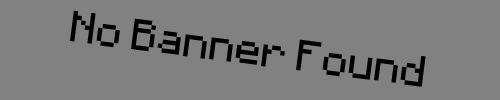
<style>
.page{position:relative;width:500px;height:100px;background:#818181}
.page>*{position:absolute;margin:0}
.t1{font:35px "Minecraft";color:#000000}
</style>
<div class="page">
<p class="t1" style="left:70px;top:10px;width:356px;height:77px;rotate:7deg">No Banner Found</p>
</div>
